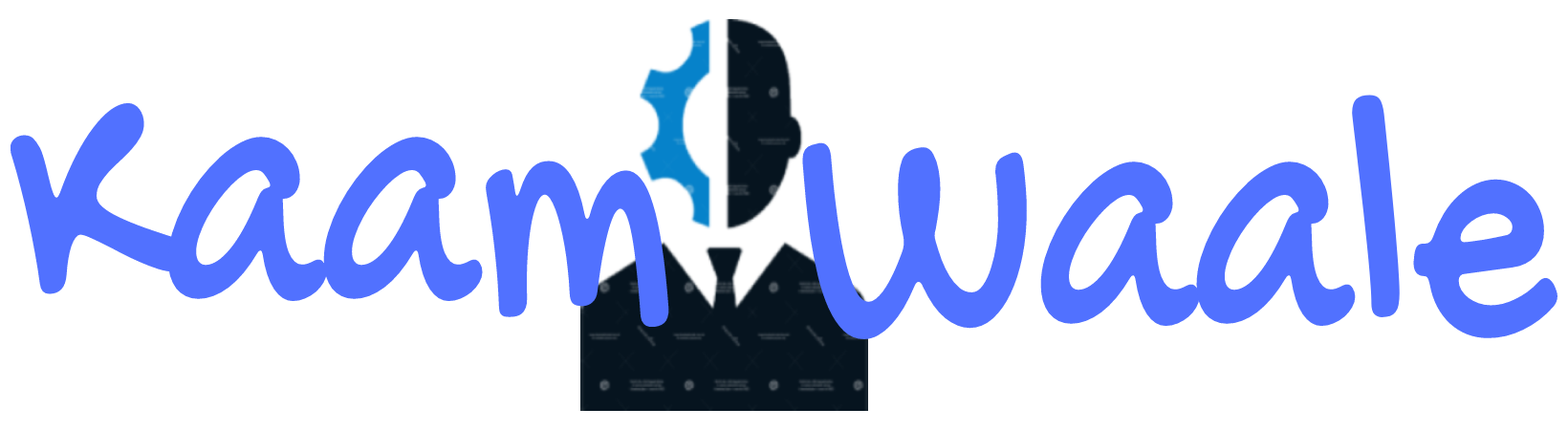
<style>
.page{position:relative;width:1568px;height:430px;background:#ffffff}
.page>*{position:absolute;margin:0}
.t1{font:378.1px "GochiHand-Regular";color:#5171ff;scale:0.74 1}
</style>
<div class="page">
<p class="t1" style="left:802px;top:95px;width:755px;height:244px">Waale</p>
<p class="t1" style="left:11px;top:103px;width:658px;height:224px">Kaam</p>
</div>
